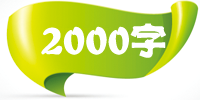
<style>
.page{position:relative;width:200px;height:100px;background:#ffffff}
.page>*{position:absolute;margin:0}
.t1{font:36px "FZSHHJW--GB1-0";color:#ffffff;font-weight:bold}
</style>
<div class="page">
<p class="t1" style="left:41px;top:23px;width:125px;height:35px">2000字</p>
</div>
